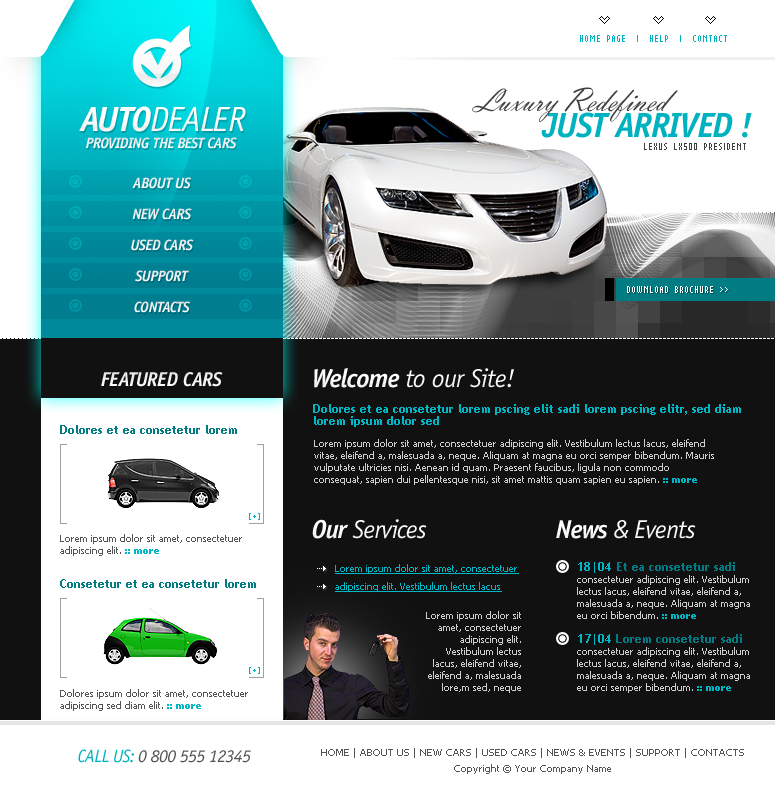
<style>
.page{position:relative;width:775px;height:800px;background:#ffffff}
.page>*{position:absolute;margin:0}
.t1{font:10px "AuXDotBitCCond";color:#00b2bf}
.t2{font:35px "VladimirScript";letter-spacing:-0.04em;color:#404040}
.t3{font:35px "OfficinaSansStd-BookItalic";letter-spacing:-0.04em;color:#fcfcfc}
.t4{font:35px "OfficinaSansStd-BoldItalic";letter-spacing:-0.04em;color:#fcfcfc}
.t5{font:35px "OfficinaSansStd-BoldItalic";letter-spacing:-0.04em;color:#00b2bf}
.t6{font:15px "OfficinaSansStd-BoldItalic";letter-spacing:-0.04em;color:#eeeff0;text-transform:uppercase}
.t7{font:10px "AuXDotBitCCond";color:#404040}
.t8{font:10px "AuXDotBitCCond";color:#ffffff}
.t9{font:20px "OfficinaSansStd-BoldItalic";letter-spacing:-0.04em;color:#f1f2f3;text-transform:uppercase}
.t10{font:26px "OfficinaSansStd-BookItalic";letter-spacing:-0.04em;color:#fbfafa}
.t11{font:26px "OfficinaSansStd-BoldItalic";letter-spacing:-0.04em;color:#fbfafa}
.t12{font:12px/12px "TrebuchetMS-Bold";color:#00b8c5}
.t13{font:12px "TrebuchetMS-Bold";color:#007c82}
.t14{font:10px/12px "Tahoma";color:#cecece}
.t15{font:10px/12px "Tahoma-Bold";color:#00b8c5}
.t16{font:26px "OfficinaSansStd-BookItalic";letter-spacing:-0.04em;color:#faf9f9}
.t17{font:26px "OfficinaSansStd-BoldItalic";letter-spacing:-0.04em;color:#faf9f9}
.t18{font:26px "OfficinaSansStd-BookItalic";letter-spacing:-0.04em;color:#fbfbfb}
.t19{font:26px "OfficinaSansStd-BoldItalic";letter-spacing:-0.04em;color:#fbfbfb}
.t20{font:10px/12px "Tahoma";color:#535353}
.t21{font:10px/18px "Tahoma";color:#00b8c5;text-decoration:underline}
.t22{font:12px/12px "TrebuchetMS-Bold";color:#007c82}
.t23{font:18px "OfficinaSansStd-BookItalic";letter-spacing:-0.04em;color:#535353}
.t24{font:18px "OfficinaSansStd-BookItalic";letter-spacing:-0.04em;color:#00b2bf}
.t25{font:10px/16px "Tahoma";color:#535353}
</style>
<div class="page">
<p class="t1" style="left:580px;top:35px;width:147px;height:7px">HOME PAGE  |  HELP  |  CONTACT</p>
<p class="t2" style="left:472px;top:87px;width:206px;height:35px">Luxury Redefined</p>
<p class="t3" style="left:79px;top:106px;width:167px;height:26px"><span class="t4">AUTO</span>DEALER</p>
<p class="t5" style="left:541px;top:112px;width:211px;height:26px">JUST ARRIVED !</p>
<p class="t6" style="left:86px;top:137px;width:151px;height:12px">PROVIDING THE BEST CARS</p>
<p class="t7" style="left:644px;top:143px;width:102px;height:7px">LEXUS LX500 PRESIDENT</p>
<p class="t6" style="left:132px;top:177px;width:59px;height:12px">ABOUT US</p>
<p class="t6" style="left:132px;top:208px;width:60px;height:12px">NEW CARS</p>
<p class="t6" style="left:131px;top:239px;width:63px;height:12px">USED CARS</p>
<p class="t6" style="left:135px;top:270px;width:54px;height:12px">SUPPORT</p>
<p class="t8" style="left:627px;top:286px;width:86px;height:7px">DOWNLOAD BROCHURE</p>
<p class="t8" style="left:720px;top:287px;width:8px;height:5px">&gt;&gt;</p>
<p class="t6" style="left:134px;top:301px;width:56px;height:12px">CONTACTS</p>
<p class="t9" style="left:101px;top:372px;width:122px;height:15px">FEATURED CARS</p>
<p class="t10" style="left:314px;top:368px;width:200px;height:20px"><span class="t11">Welcome </span>to our Site!</p>
<p class="t12" style="left:313px;top:404px;width:428px;height:23px">Dolores et ea consetetur lorem pscing elit sadi lorem pscing elitr, sed diam lorem ipsum dolor sed</p>
<p class="t13" style="left:60px;top:425px;width:177px;height:9px">Dolores et ea consetetur lorem</p>
<p class="t14" style="left:314px;top:439px;width:400px;height:46px">Lorem ipsum dolor sit amet, consectetuer adipiscing elit. Vestibulum lectus lacus, eleifend vitae, eleifend a, malesuada a, neque. Aliquam at magna eu orci semper bibendum. Mauris vulputate ultricies nisi. Aenean id quam. Praesent faucibus, ligula non commodo consequat, sapien dui pellentesque nisi, sit amet mattis quam sapien eu sapien. <span class="t15">:: more</span></p>
<p class="t1" style="left:249px;top:513px;width:11px;height:7px">[+]</p>
<p class="t16" style="left:312px;top:519px;width:115px;height:20px"><span class="t17">Our </span>Services</p>
<p class="t18" style="left:556px;top:520px;width:140px;height:19px"><span class="t19">News </span>&amp; Events</p>
<p class="t20" style="left:60px;top:534px;width:182px;height:22px">Lorem ipsum dolor sit amet, consectetuer adipiscing elit. <span class="t15">:: more</span></p>
<p class="t21" style="left:335px;top:564px;width:184px;height:28px">Lorem ipsum dolor sit amet, consectetuer adipiscing elit. Vestibulum lectus lacus</p>
<p class="t14" style="left:577px;top:562px;width:173px;height:131px"><span class="t12">18|04 </span><span class="t22">Et ea consetetur sadi <br></span>consectetuer adipiscing elit. Vestibulum lectus lacus, eleifend vitae, eleifend a, malesuada a, neque. Aliquam at magna eu orci bibendum. <span class="t15">:: more<br><br></span><span class="t12">17|04 </span><span class="t22">Lorem consetetur sadi <br></span>consectetuer adipiscing elit. Vestibulum lectus lacus, eleifend vitae, eleifend a, malesuada a, neque. Aliquam at magna eu orci semper bibendum. <span class="t15">:: more</span></p>
<p class="t13" style="left:60px;top:579px;width:196px;height:9px">Consetetur et ea consetetur lorem</p>
<p class="t14" style="left:426px;top:611px;width:95px;height:82px;text-align:right">Lorem ipsum dolor sit amet, consectetuer adipiscing elit. Vestibulum lectus lacus, eleifend vitae, eleifend a, malesuada lore,m sed, neque</p>
<p class="t1" style="left:249px;top:667px;width:11px;height:7px">[+]</p>
<p class="t20" style="left:60px;top:689px;width:188px;height:22px">Dolores ipsum dolor sit amet, consectetuer adipiscing sed diam elit. <span class="t15">:: more</span></p>
<p class="t23" style="left:78px;top:749px;width:173px;height:14px"><span class="t24">CALL US: </span>0 800 555 12345</p>
<p class="t25" style="left:321px;top:748px;width:423px;height:26px;text-align:center">HOME | ABOUT US | NEW CARS | USED CARS | NEWS &amp; EVENTS | SUPPORT | CONTACTS<br>Copyright © Your Company Name</p>
</div>
